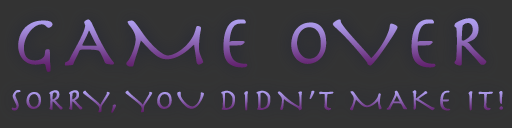
<style>
.page{position:relative;width:512px;height:128px;background:#333333}
.page>*{position:absolute;margin:0}
.t1{font:76.2px "Herculanum";letter-spacing:0.075em;text-transform:uppercase}
.t2{font:31.3px "Herculanum";letter-spacing:0.075em;text-transform:uppercase}
</style>
<div class="page">
<p class="t1" style="left:18px;top:18px;width:469px;height:54px">GAME OVER</p>
<p class="t2" style="left:11px;top:90px;width:492px;height:23px">Sorry, You didn’t make it!</p>
</div>
